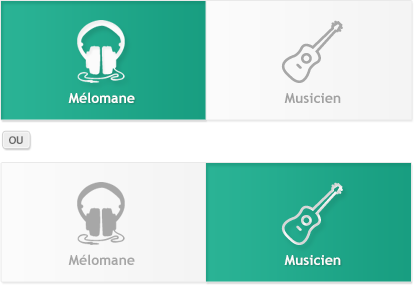
<style>
.page{position:relative;width:414px;height:285px}
.page>*{position:absolute;margin:0}
.t1{font:14px "TrebuchetMS-Bold";color:#ffffff}
.t2{font:14px "TrebuchetMS-Bold";color:#a1a1a1}
.t3{font:11px "TrebuchetMS-Bold";color:#6a6a6a}
.t4{font:14px "TrebuchetMS-Bold";color:#a6a6a6}
.t5{font:14px "TrebuchetMS-Bold";color:#fbfbfb}
</style>
<div class="page">
<p class="t1" style="left:68px;top:92px;width:67px;height:11px">Mélomane</p>
<p class="t2" style="left:284px;top:93px;width:57px;height:10px">Musicien</p>
<p class="t3" style="left:9px;top:136px;width:14px;height:8px">OU</p>
<p class="t4" style="left:68px;top:254px;width:67px;height:11px">Mélomane</p>
<p class="t5" style="left:284px;top:255px;width:57px;height:10px">Musicien</p>
</div>
